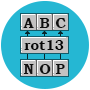
<style>
.page{position:relative;width:90px;height:90px;background:#25b7d3}
.page>*{position:absolute;margin:0}
.t1{font:14px "BookmanOldStyle-Bold";color:#000000}
</style>
<div class="page">
<p class="t1" style="left:23px;top:18px;width:11px;height:10px;opacity:0.96">A</p>
<p class="t1" style="left:39px;top:18px;width:11px;height:10px;opacity:0.96">B</p>
<p class="t1" style="left:55px;top:18px;width:11px;height:10px;opacity:0.96">C</p>
<p class="t1" style="left:24px;top:40px;width:40px;height:10px">rot13</p>
<p class="t1" style="left:23px;top:64px;width:11px;height:10px;opacity:0.96">N</p>
<p class="t1" style="left:39px;top:64px;width:12px;height:10px;opacity:0.96">O</p>
<p class="t1" style="left:55px;top:64px;width:10px;height:10px;opacity:0.96">P</p>
</div>
